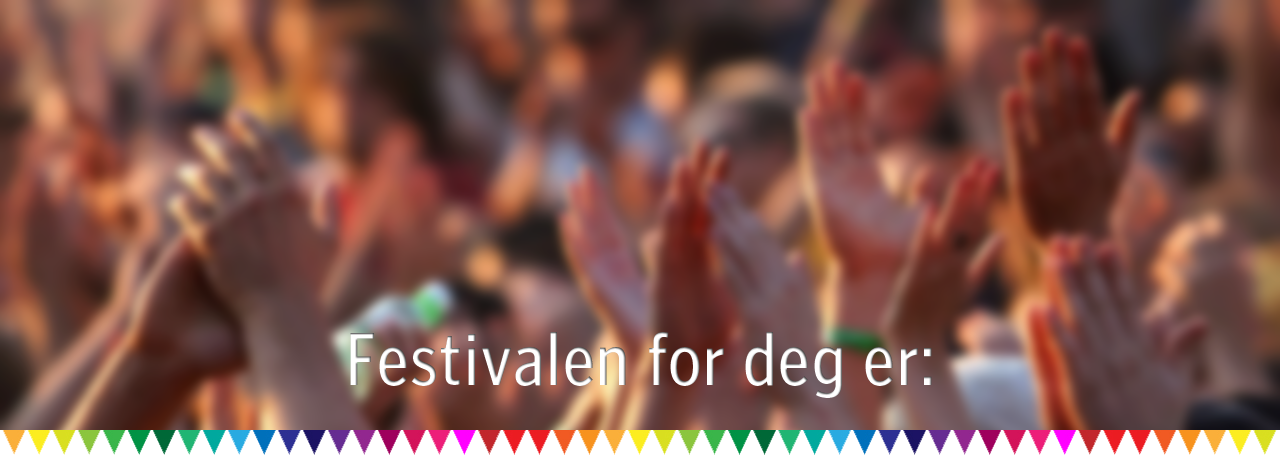
<style>
.page{position:relative;width:1280px;height:460px}
.page>*{position:absolute;margin:0}
.t1{font:76.4px "PoynterGothicText-RegCond";letter-spacing:0.02em;color:#ffffff}
</style>
<div class="page">
<p class="t1" style="left:350px;top:332px;width:582px;height:66px">Festivalen for deg er:</p>
</div>
